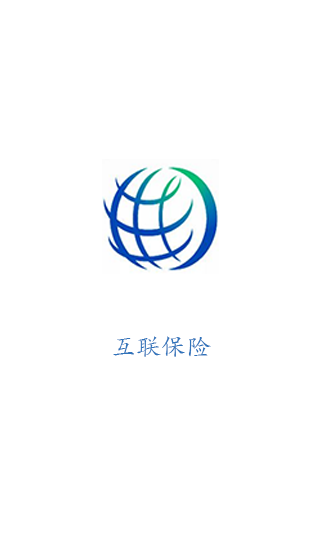
<style>
.page{position:relative;width:320px;height:548px;background:#ffffff}
.page>*{position:absolute;margin:0}
.t1{font:25px "STKaiti";color:#3174bb}
</style>
<div class="page">
<p class="t1" style="left:113px;top:336px;width:98px;height:21px">互联保险</p>
</div>
